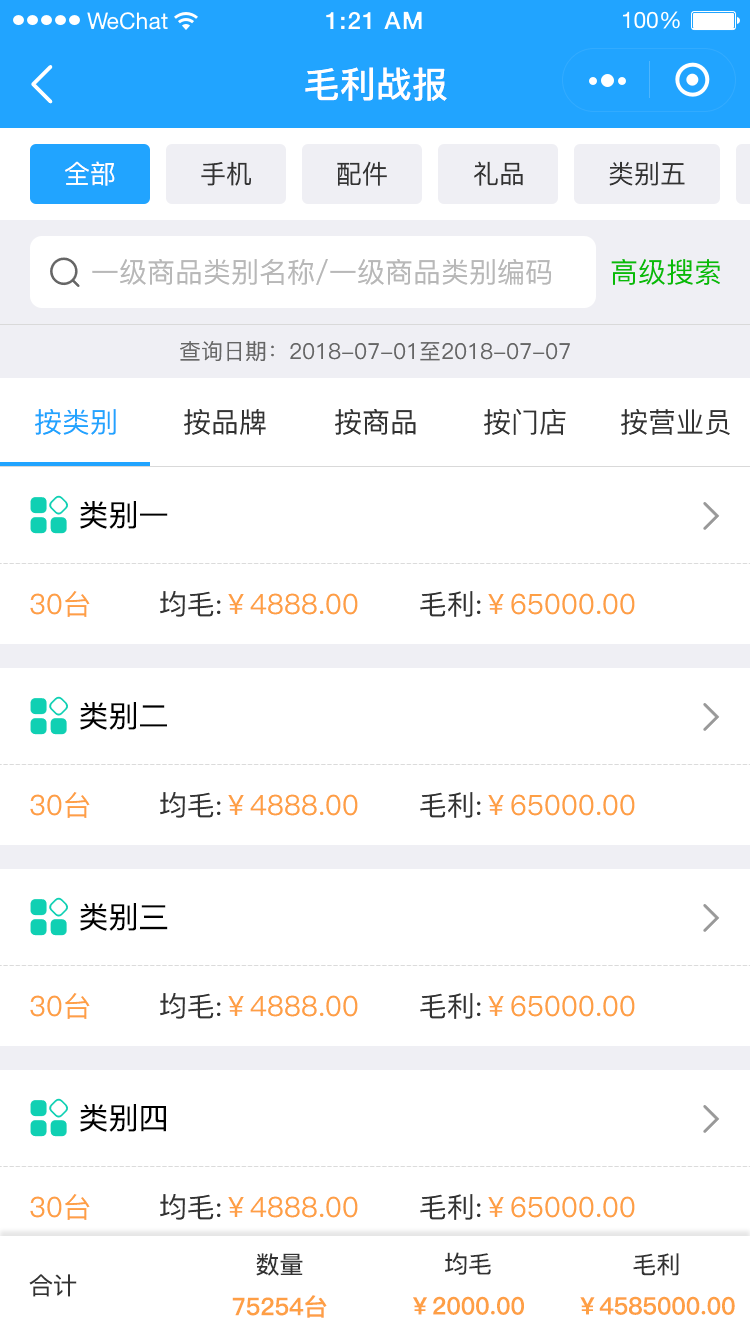
<style>
.page{position:relative;width:750px;height:1334px;background:#ffffff}
.page>*{position:absolute;margin:0}
.t1{font:36px "PingFang-SC-Bold";color:#ffffff}
.t2{font:26px "PingFang-SC-Medium";color:#ffffff}
.t3{font:26px "PingFang-SC-Medium";color:#333333}
.t4{font:28px "PingFang-SC-Medium";color:#b8b8b8}
.t5{font:28px "PingFang-SC-Medium";color:#09bb07}
.t6{font:22px "PingFang-SC-Medium";color:#666666}
.t7{font:28px "PingFang-SC-Medium";color:#21a4ff}
.t8{font:28px "PingFang-SC-Medium";color:#333333}
.t9{font:30px "PingFang-SC-Medium";color:#000000}
.t10{font:28px "PingFang-SC-Medium";color:#fe9f45}
.t11{font:24px "PingFang-SC-Medium";color:#333333}
.t12{font:24px "PingFang-SC-Bold";color:#fe9f45}
</style>
<div class="page">
<p class="t1" style="left:305px;top:67px;width:142px;height:34px">毛利战报</p>
<p class="t2" style="left:65px;top:161px;width:50px;height:25px">全部</p>
<p class="t3" style="left:201px;top:161px;width:50px;height:25px">手机</p>
<p class="t3" style="left:337px;top:161px;width:50px;height:25px">配件</p>
<p class="t3" style="left:474px;top:161px;width:49px;height:25px">礼品</p>
<p class="t3" style="left:609px;top:161px;width:76px;height:25px">类别五</p>
<p class="t4" style="left:92px;top:259px;width:459px;height:26px">一级商品类别名称/一级商品类别编码</p>
<p class="t5" style="left:611px;top:259px;width:109px;height:26px">高级搜索</p>
<p class="t6" style="left:180px;top:341px;width:390px;height:21px">查询日期：2018-07-01至2018-07-07</p>
<p class="t7" style="left:35px;top:409px;width:81px;height:26px">按类别</p>
<p class="t8" style="left:184px;top:409px;width:82px;height:26px">按品牌</p>
<p class="t8" style="left:335px;top:409px;width:81px;height:26px">按商品</p>
<p class="t8" style="left:484px;top:409px;width:82px;height:26px">按门店</p>
<p class="t8" style="left:621px;top:409px;width:109px;height:26px">按营业员</p>
<p class="t9" style="left:80px;top:501px;width:88px;height:28px">类别一</p>
<p class="t10" style="left:30px;top:591px;width:60px;height:26px">30台</p>
<p class="t10" style="left:160px;top:591px;width:198px;height:26px"><span class="t8">均毛:</span>￥4888.00</p>
<p class="t10" style="left:420px;top:591px;width:215px;height:26px"><span class="t8">毛利:</span>￥65000.00</p>
<p class="t9" style="left:80px;top:702px;width:87px;height:28px">类别二</p>
<p class="t10" style="left:30px;top:792px;width:60px;height:26px">30台</p>
<p class="t10" style="left:160px;top:792px;width:198px;height:26px"><span class="t8">均毛:</span>￥4888.00</p>
<p class="t10" style="left:420px;top:792px;width:215px;height:26px"><span class="t8">毛利:</span>￥65000.00</p>
<p class="t9" style="left:80px;top:903px;width:88px;height:28px">类别三</p>
<p class="t10" style="left:30px;top:993px;width:60px;height:26px">30台</p>
<p class="t10" style="left:160px;top:993px;width:198px;height:26px"><span class="t8">均毛:</span>￥4888.00</p>
<p class="t10" style="left:420px;top:993px;width:215px;height:26px"><span class="t8">毛利:</span>￥65000.00</p>
<p class="t9" style="left:80px;top:1104px;width:86px;height:28px">类别四</p>
<p class="t10" style="left:30px;top:1194px;width:60px;height:26px">30台</p>
<p class="t10" style="left:160px;top:1194px;width:198px;height:26px"><span class="t8">均毛:</span>￥4888.00</p>
<p class="t10" style="left:420px;top:1194px;width:215px;height:26px"><span class="t8">毛利:</span>￥65000.00</p>
<p class="t11" style="left:256px;top:1253px;width:47px;height:23px">数量</p>
<p class="t11" style="left:445px;top:1252px;width:46px;height:23px">均毛</p>
<p class="t11" style="left:633px;top:1253px;width:46px;height:23px">毛利</p>
<p class="t11" style="left:29px;top:1274px;width:48px;height:23px">合计</p>
<p class="t12" style="left:232px;top:1295px;width:95px;height:23px">75254台</p>
<p class="t12" style="left:413px;top:1296px;width:111px;height:19px">￥2000.00</p>
<p class="t12" style="left:580px;top:1296px;width:155px;height:19px">￥4585000.00</p>
</div>
